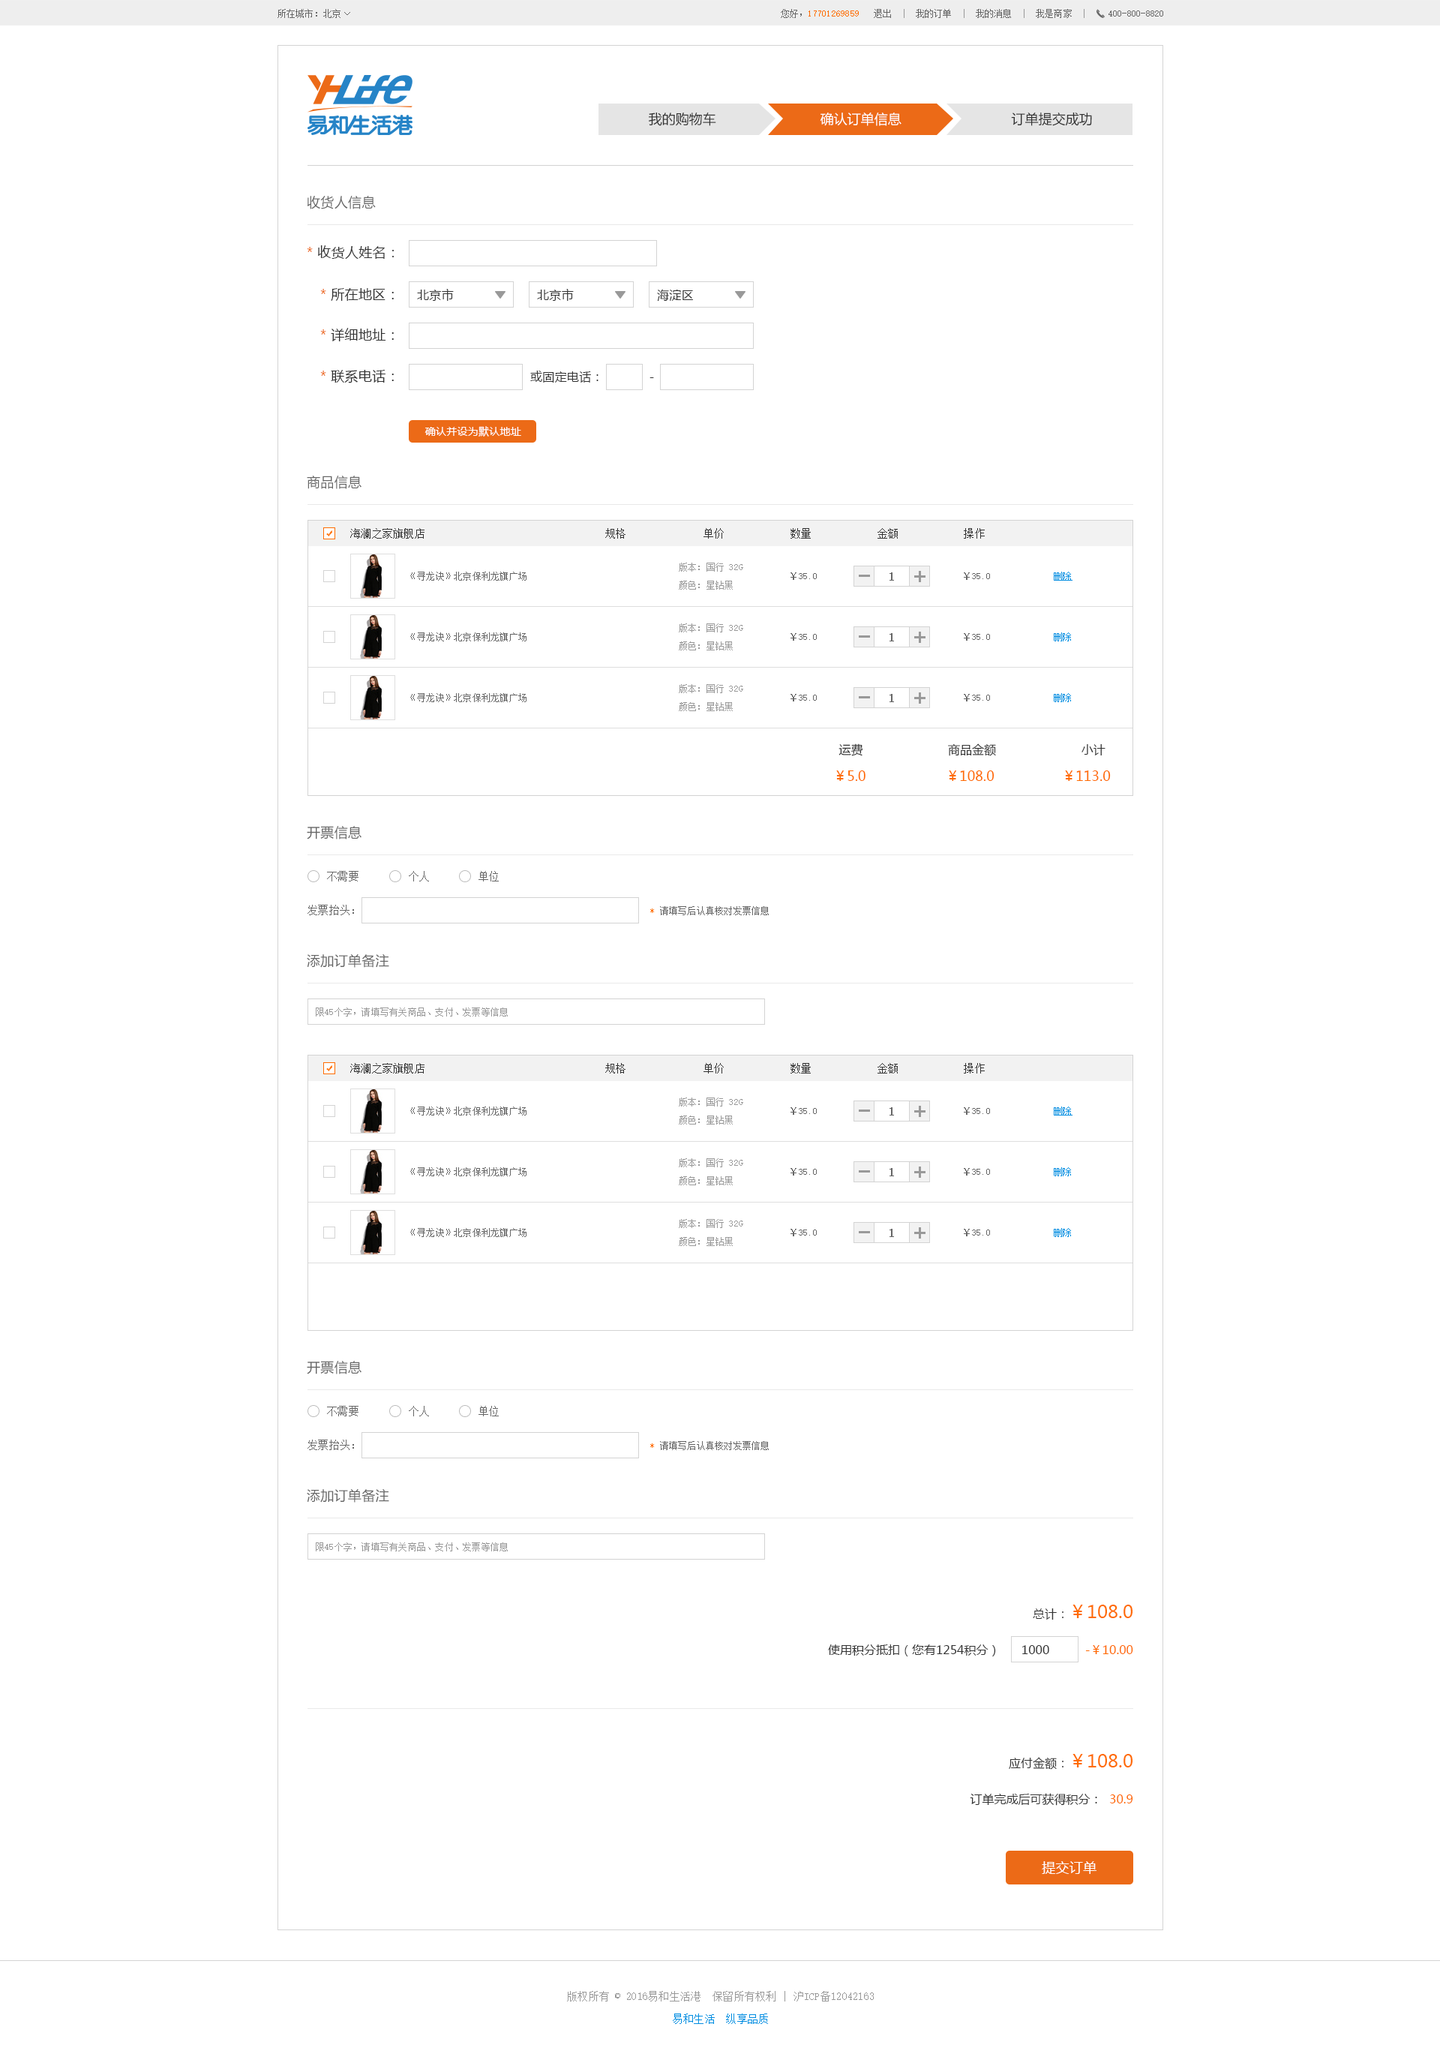
<style>
.page{position:relative;width:1440px;height:2054px;background:#ffffff}
.page>*{position:absolute;margin:0}
.t1{font:9px "SimSun";letter-spacing:0.02em;color:#666666}
.t2{font:9px "SimSun";letter-spacing:0.02em;color:#ff6c00}
.t3{font:9px "SimSun";letter-spacing:0.02em;color:#999999}
.t4{font:13.5px "MicrosoftYaHei";color:#333333}
.t5{font:13.5px "MicrosoftYaHei";color:#ffffff}
.t6{font:13.5px "MicrosoftYaHei";letter-spacing:0.02em;color:#666666}
.t7{font:13.5px "MicrosoftYaHei";letter-spacing:0.02em;color:#333333}
.t8{font:13.5px "MicrosoftYaHei";letter-spacing:0.02em;color:#ec6a17}
.t9{font:12px "MicrosoftYaHei";letter-spacing:0.02em;color:#333333}
.t10{font:10.5px "MicrosoftYaHei";letter-spacing:0.02em;color:#ffffff}
.t11{font:10.5px "SimSun";letter-spacing:0.02em;color:#333333}
.t12{font:9px/18px "SimSun";letter-spacing:0.02em;color:#999999}
.t13{font:12px "SimSun";color:#666666;font-weight:bold}
.t14{font:9px "SimSun";letter-spacing:0.02em;color:#008de1;text-decoration:underline}
.t15{font:9px "SimSun";letter-spacing:0.02em;color:#008de1}
.t16{font:12px/27px "MicrosoftYaHei";color:#333333}
.t17{font:13.5px/27px "MicrosoftYaHei";color:#ff6c00}
.t18{font:10.5px "SimSun";letter-spacing:0.02em;color:#666666}
.t19{font:12px/36px "MicrosoftYaHei";color:#333333}
.t20{font:18px/36px "MicrosoftYaHei";color:#ff6c00}
.t21{font:12px/36px "MicrosoftYaHei";color:#ff6c00}
.t22{font:13.5px "MicrosoftYaHei";letter-spacing:0.02em;color:#ffffff}
.t23{font:10.5px/22.5px "SimSun";letter-spacing:0.02em;color:#999999}
.t24{font:10.5px/22.5px "SimSun";letter-spacing:0.02em;color:#008de1}
</style>
<div class="page">
<p class="t1" style="left:278px;top:9px;width:62px;height:9px">所在城市：北京</p>
<p class="t1" style="left:344px;top:12px;width:6px;height:3px">&gt;</p>
<p class="t2" style="left:781px;top:9px;width:303px;height:9px"><span class="t1">您好，</span>17701269859<span class="t1">   退出</span><span class="t3">  |  </span><span class="t1">我的订单</span><span class="t3">  |  </span><span class="t1">我的消息</span><span class="t3">  |  </span><span class="t1">我是商家</span><span class="t3">  |</span></p>
<p class="t1" style="left:1108px;top:10px;width:55px;height:6px">400-800-8820</p>
<p class="t4" style="left:649px;top:112px;width:67px;height:14px">我的购物车</p>
<p class="t5" style="left:820px;top:112px;width:82px;height:14px">确认订单信息</p>
<p class="t4" style="left:1011px;top:112px;width:81px;height:14px">订单提交成功</p>
<p class="t6" style="left:307px;top:196px;width:69px;height:13px">收货人信息</p>
<p class="t7" style="left:307px;top:245px;width:87px;height:14px"><span class="t8">* </span>收货人姓名：</p>
<p class="t7" style="left:320px;top:288px;width:74px;height:13px"><span class="t8">* </span>所在地区：</p>
<p class="t9" style="left:417px;top:289px;width:37px;height:12px">北京市</p>
<p class="t9" style="left:537px;top:289px;width:37px;height:12px">北京市</p>
<p class="t9" style="left:657px;top:289px;width:36px;height:13px">海淀区</p>
<p class="t7" style="left:320px;top:328px;width:74px;height:13px"><span class="t8">* </span>详细地址：</p>
<p class="t7" style="left:320px;top:370px;width:74px;height:13px"><span class="t8">* </span>联系电话：</p>
<p class="t9" style="left:530px;top:370px;width:124px;height:12px">或固定电话：            -</p>
<p class="t10" style="left:424px;top:426px;width:97px;height:10px">确认并设为默认地址</p>
<p class="t6" style="left:307px;top:476px;width:55px;height:13px">商品信息</p>
<p class="t11" style="left:350px;top:528px;width:635px;height:10px">海澜之家旗舰店                                 规格              单价            数量            金额            操作</p>
<p class="t12" style="left:679px;top:562px;width:64px;height:28px">版本：国行 32G <br>颜色：星钻黑</p>
<p class="t1" style="left:410px;top:572px;width:116px;height:8px">《寻龙诀》北京保利龙旗广场</p>
<p class="t1" style="left:790px;top:572px;width:27px;height:8px">￥35.0</p>
<p class="t13" style="left:890px;top:572px;width:4px;height:8px">1</p>
<p class="t1" style="left:964px;top:572px;width:26px;height:8px">￥35.0</p>
<p class="t14" style="left:1054px;top:572px;width:18px;height:8px">删除</p>
<p class="t12" style="left:679px;top:623px;width:64px;height:27px">版本：国行 32G <br>颜色：星钻黑</p>
<p class="t1" style="left:410px;top:632px;width:116px;height:9px">《寻龙诀》北京保利龙旗广场</p>
<p class="t1" style="left:790px;top:633px;width:27px;height:7px">￥35.0</p>
<p class="t13" style="left:890px;top:633px;width:4px;height:8px">1</p>
<p class="t1" style="left:964px;top:633px;width:26px;height:7px">￥35.0</p>
<p class="t15" style="left:1054px;top:632px;width:17px;height:9px">删除</p>
<p class="t12" style="left:679px;top:684px;width:64px;height:27px">版本：国行 32G <br>颜色：星钻黑</p>
<p class="t1" style="left:410px;top:693px;width:116px;height:9px">《寻龙诀》北京保利龙旗广场</p>
<p class="t1" style="left:790px;top:694px;width:27px;height:7px">￥35.0</p>
<p class="t13" style="left:890px;top:694px;width:4px;height:8px">1</p>
<p class="t1" style="left:964px;top:694px;width:26px;height:7px">￥35.0</p>
<p class="t15" style="left:1054px;top:693px;width:17px;height:9px">删除</p>
<p class="t16" style="left:836px;top:743px;width:275px;height:38px;text-align:center">运费                        商品金额                        小计<br><span class="t17">￥5.0                    ￥108.0                 ￥113.0</span></p>
<p class="t6" style="left:307px;top:826px;width:55px;height:13px">开票信息</p>
<p class="t18" style="left:327px;top:871px;width:31px;height:10px">不需要</p>
<p class="t18" style="left:409px;top:871px;width:20px;height:10px">个人</p>
<p class="t18" style="left:478px;top:871px;width:21px;height:10px">单位</p>
<p class="t1" style="left:308px;top:904px;width:461px;height:11px"><span class="t18">发票抬头：                                                     </span><span class="t2">* </span>请填写后认真核对发票信息</p>
<p class="t6" style="left:307px;top:954px;width:82px;height:14px">添加订单备注</p>
<p class="t3" style="left:316px;top:1007px;width:192px;height:9px">限45个字，请填写有关商品、支付、发票等信息</p>
<p class="t11" style="left:350px;top:1063px;width:635px;height:10px">海澜之家旗舰店                                 规格              单价            数量            金额            操作</p>
<p class="t12" style="left:679px;top:1097px;width:64px;height:27px">版本：国行 32G <br>颜色：星钻黑</p>
<p class="t1" style="left:410px;top:1106px;width:116px;height:9px">《寻龙诀》北京保利龙旗广场</p>
<p class="t1" style="left:790px;top:1107px;width:27px;height:7px">￥35.0</p>
<p class="t13" style="left:890px;top:1107px;width:4px;height:8px">1</p>
<p class="t1" style="left:964px;top:1107px;width:26px;height:7px">￥35.0</p>
<p class="t14" style="left:1054px;top:1106px;width:18px;height:9px">删除</p>
<p class="t12" style="left:679px;top:1158px;width:64px;height:27px">版本：国行 32G <br>颜色：星钻黑</p>
<p class="t1" style="left:410px;top:1167px;width:116px;height:9px">《寻龙诀》北京保利龙旗广场</p>
<p class="t1" style="left:790px;top:1168px;width:27px;height:7px">￥35.0</p>
<p class="t13" style="left:890px;top:1168px;width:4px;height:8px">1</p>
<p class="t1" style="left:964px;top:1168px;width:26px;height:7px">￥35.0</p>
<p class="t15" style="left:1054px;top:1167px;width:17px;height:9px">删除</p>
<p class="t1" style="left:410px;top:1228px;width:116px;height:9px">《寻龙诀》北京保利龙旗广场</p>
<p class="t12" style="left:679px;top:1219px;width:64px;height:27px">版本：国行 32G <br>颜色：星钻黑</p>
<p class="t1" style="left:790px;top:1228px;width:27px;height:8px">￥35.0</p>
<p class="t13" style="left:890px;top:1228px;width:4px;height:9px">1</p>
<p class="t1" style="left:964px;top:1228px;width:26px;height:8px">￥35.0</p>
<p class="t15" style="left:1054px;top:1228px;width:17px;height:9px">删除</p>
<p class="t6" style="left:307px;top:1360px;width:55px;height:14px">开票信息</p>
<p class="t18" style="left:327px;top:1406px;width:31px;height:10px">不需要</p>
<p class="t18" style="left:409px;top:1406px;width:20px;height:10px">个人</p>
<p class="t18" style="left:478px;top:1406px;width:21px;height:10px">单位</p>
<p class="t1" style="left:308px;top:1439px;width:461px;height:11px"><span class="t18">发票抬头：                                                     </span><span class="t2">* </span>请填写后认真核对发票信息</p>
<p class="t6" style="left:307px;top:1489px;width:82px;height:13px">添加订单备注</p>
<p class="t3" style="left:316px;top:1542px;width:192px;height:9px">限45个字，请填写有关商品、支付、发票等信息</p>
<p class="t19" style="left:828px;top:1604px;width:305px;height:52px;text-align:right">总计：<span class="t20">￥108.0<br></span>使用积分抵扣（您有1254积分）      1000          <span class="t21">-￥10.00</span></p>
<p class="t19" style="left:970px;top:1754px;width:163px;height:51px;text-align:right">应付金额：<span class="t20">￥108.0<br></span>订单完成后可获得积分：  <span class="t21">30.9</span></p>
<p class="t22" style="left:1042px;top:1861px;width:54px;height:13px">提交订单</p>
<p class="t23" style="left:567px;top:1990px;width:307px;height:34px;text-align:center">版权所有 © 2016易和生活港  保留所有权利 | 沪ICP备12042163<br><span class="t24">易和生活  纵享品质</span></p>
</div>
